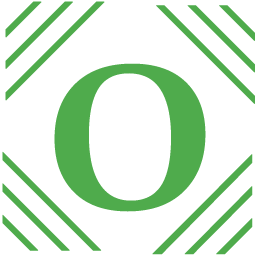
<style>
.page{position:relative;width:256px;height:256px;background:#ffffff}
.page>*{position:absolute;margin:0}
.t1{font:205.3px "Constantia-Bold";color:#4fab4c;font-weight:bold}
</style>
<div class="page">
<p class="t1" style="left:54px;top:63px;width:152px;height:149px">O</p>
</div>
